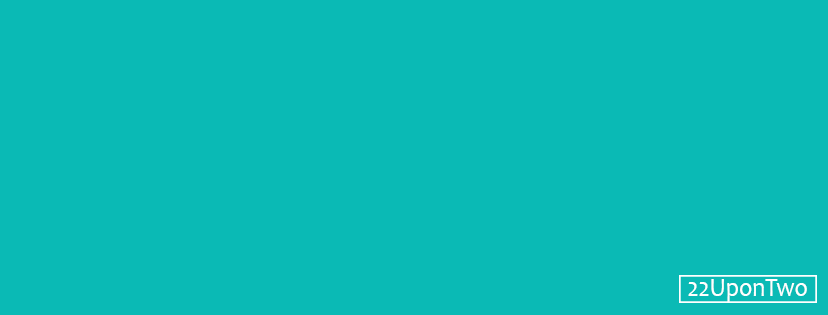
<style>
.page{position:relative;width:828px;height:315px;background:#0abab5}
.page>*{position:absolute;margin:0}
.t1{font:27.3px "Candara";color:#ffffff;scale:0.87 1}
</style>
<div class="page">
<p class="t1" style="left:688px;top:279px;width:119px;height:23px">22UponTwo</p>
</div>
